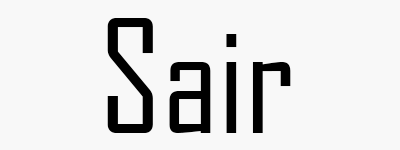
<style>
.page{position:relative;width:400px;height:150px;background:#f8f8f8}
.page>*{position:absolute;margin:0}
.t1{font:150px "AgencyFB-Reg";color:#000000}
</style>
<div class="page">
<p class="t1" style="left:107px;top:18px;width:184px;height:115px">Sair</p>
</div>
